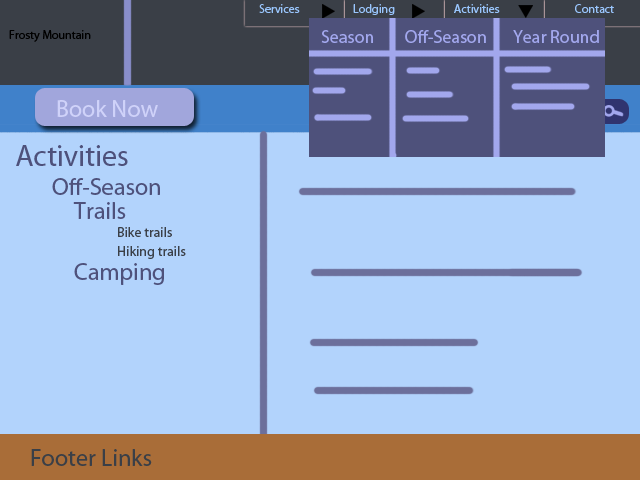
<style>
.page{position:relative;width:640px;height:480px;background:#b2d3fc}
.page>*{position:absolute;margin:0}
.t1{font:12px "MyriadPro-Regular";color:#99c5fc}
.t2{font:12px "MyriadPro-Regular";color:#000000}
.t3{font:18px "MyriadPro-Regular";color:#a2a7ed}
.t4{font:24px "MyriadPro-Regular";color:#cfd2f9}
.t5{font:30px "MyriadPro-Regular";color:#4e517b}
.t6{font:24px "MyriadPro-Regular";color:#4e517b}
.t7{font:14px "MyriadPro-Regular";color:#3a3f47}
.t8{font:24px "MyriadPro-Regular";color:#3a3f47}
</style>
<div class="page">
<p class="t1" style="left:259px;top:4px;width:41px;height:9px">Services</p>
<p class="t1" style="left:353px;top:4px;width:42px;height:11px">Lodging</p>
<p class="t1" style="left:454px;top:4px;width:46px;height:9px">Activities</p>
<p class="t1" style="left:575px;top:4px;width:39px;height:9px">Contact</p>
<p class="t2" style="left:9px;top:30px;width:82px;height:12px">Frosty Mountain</p>
<p class="t3" style="left:321px;top:30px;width:52px;height:13px">Season</p>
<p class="t3" style="left:405px;top:30px;width:81px;height:13px">Off-Season</p>
<p class="t3" style="left:513px;top:30px;width:86px;height:13px">Year Round</p>
<p class="t4" style="left:57px;top:100px;width:101px;height:17px">Book Now</p>
<p class="t5" style="left:16px;top:145px;width:112px;height:21px">Activities</p>
<p class="t6" style="left:52px;top:178px;width:108px;height:17px">Off-Season</p>
<p class="t6" style="left:73px;top:202px;width:53px;height:17px">Trails</p>
<p class="t7" style="left:118px;top:227px;width:54px;height:10px">Bike trails</p>
<p class="t7" style="left:118px;top:246px;width:68px;height:13px">Hiking trails</p>
<p class="t6" style="left:74px;top:263px;width:90px;height:22px">Camping</p>
<p class="t8" style="left:31px;top:449px;width:121px;height:17px">Footer Links</p>
</div>
